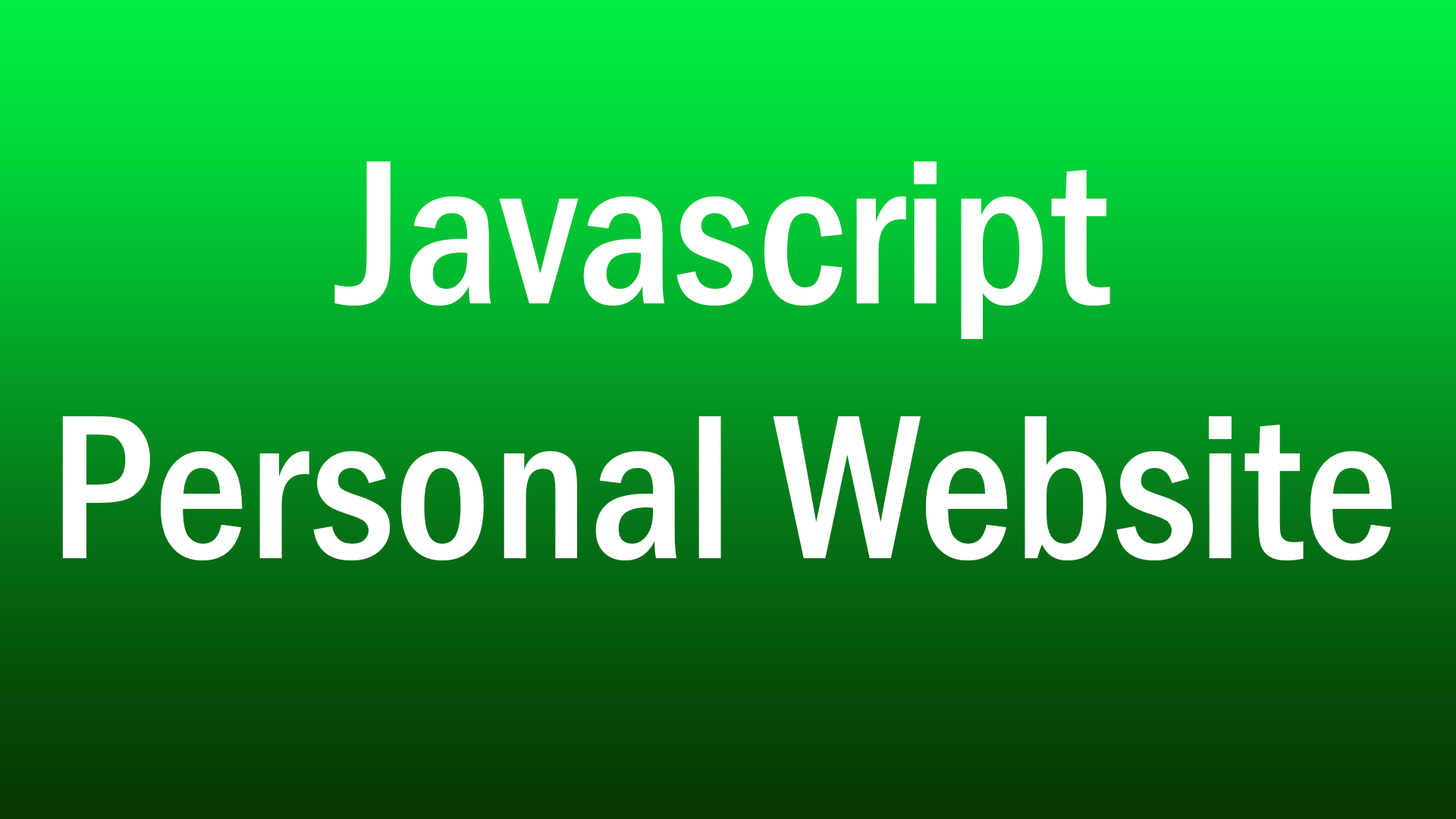
<style>
.page{position:relative;width:1456px;height:819px}
.page>*{position:absolute;margin:0}
.t1{font:212.3px "FranklinGothic-MediumCond";color:#ffffff}
</style>
<div class="page">
<p class="t1" style="left:62px;top:161px;width:1330px;height:399px;text-align:center">Javascript<br>Personal Website</p>
</div>
